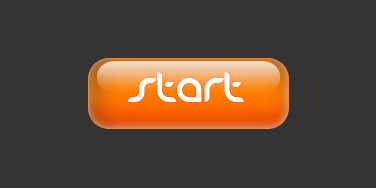
<style>
.page{position:relative;width:376px;height:188px;background:#333333}
.page>*{position:absolute;margin:0}
.t1{font:30px "Danube";color:#ffffff}
</style>
<div class="page">
<p class="t1" style="left:128px;top:72px;width:116px;height:30px">start</p>
</div>
